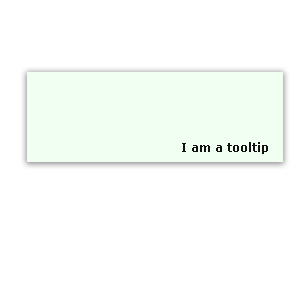
<style>
.page{position:relative;width:300px;height:300px;background:#ffffff}
.page>*{position:absolute;margin:0}
.t1{font:12px "Verdana-Bold";color:#111111}
</style>
<div class="page">
<p class="t1" style="left:182px;top:142px;width:86px;height:12px">I am a tooltip</p>
</div>
